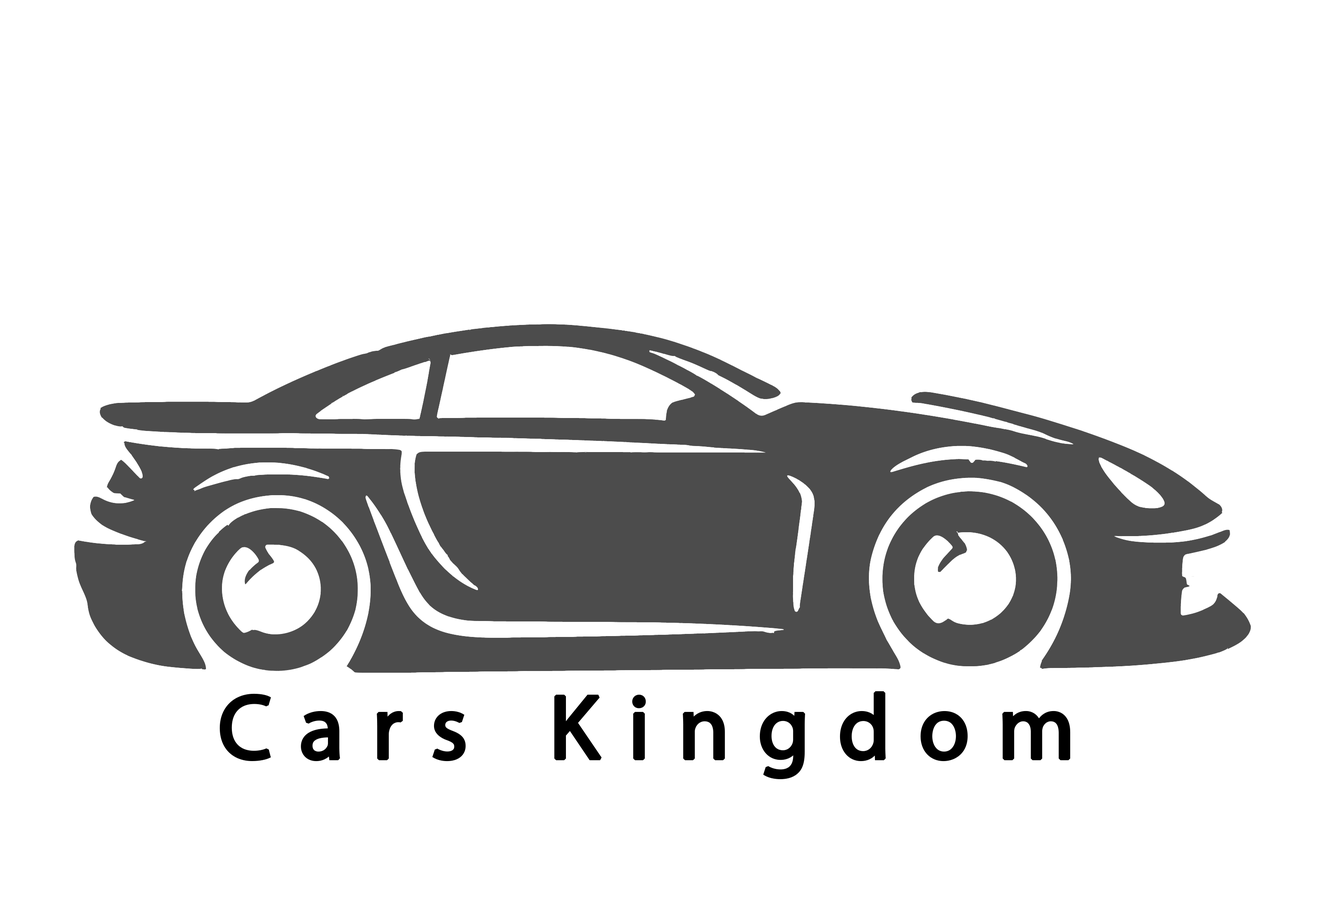
<style>
.page{position:relative;width:1318px;height:905px;background:#ffffff}
.page>*{position:absolute;margin:0}
.t1{font:129.3px "MyriadArabic-Regular";letter-spacing:0.2em;color:#000000;font-weight:bold}
</style>
<div class="page">
<p class="t1" style="left:219px;top:691px;width:851px;height:88px">Cars Kingdom</p>
</div>
